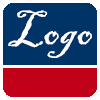
<style>
.page{position:relative;width:100px;height:100px;background:#003366}
.page>*{position:absolute;margin:0}
.t1{font:48px "BlackadderITC-Regular";color:#ffffff;font-style:italic}
</style>
<div class="page">
<p class="t1" style="left:8px;top:10px;width:84px;height:48px">Logo</p>
</div>
